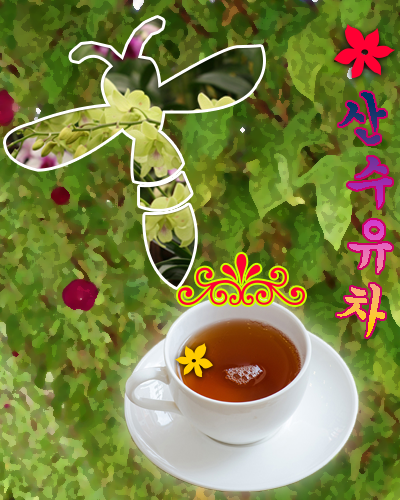
<style>
.page{position:relative;width:400px;height:500px}
.page>*{position:absolute;margin:0}
.t1{font:50px "Gungsuh"}
</style>
<div class="page">
<p class="t1" style="left:337px;top:92px;width:55px;height:245px">산<br>수<br>유<br>차</p>
</div>
